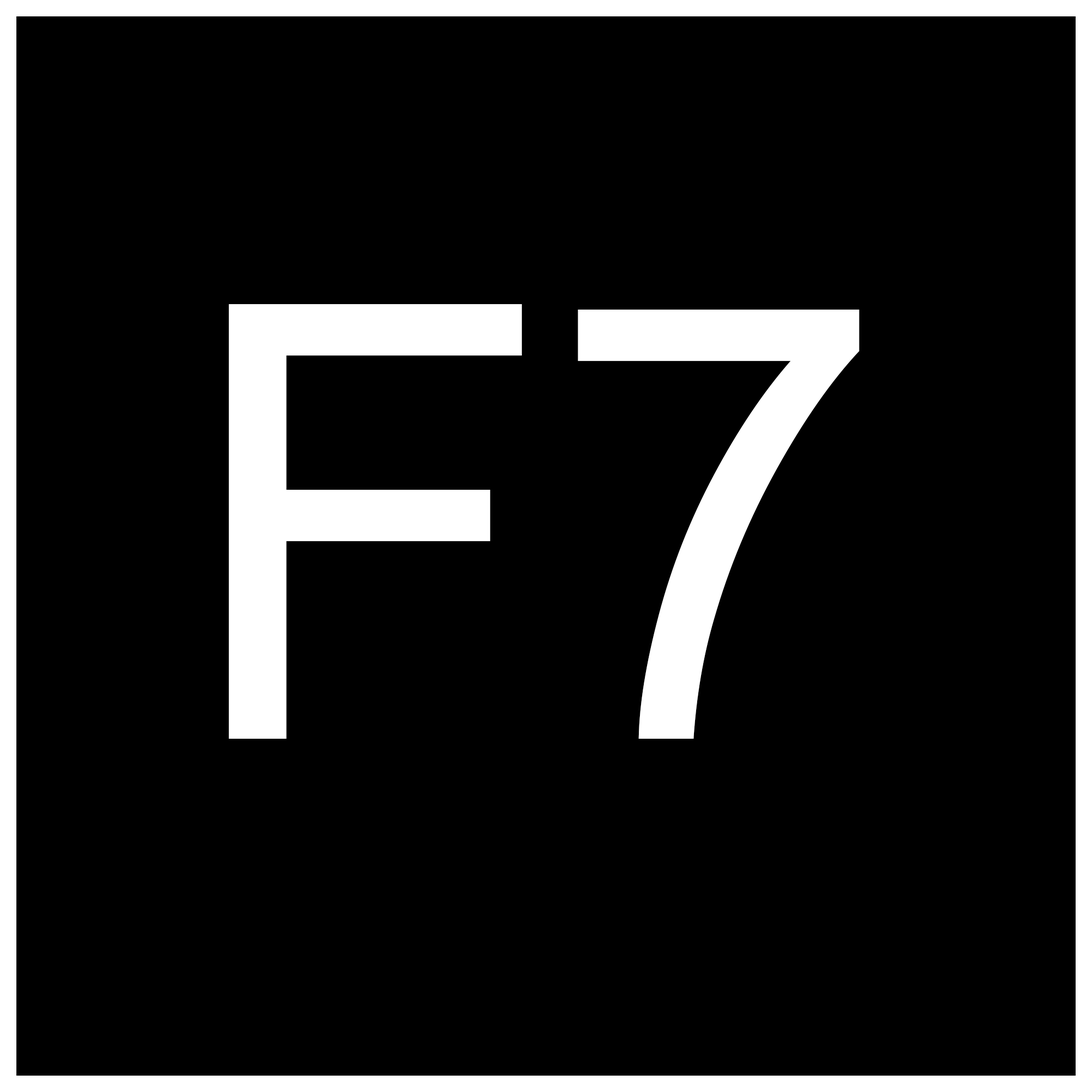
<style>
.page{position:relative;width:1092px;height:1092px;background:#000000}
.page>*{position:absolute;margin:0}
.t1{font:606.7px "ArialMT";color:#ffffff}
</style>
<div class="page">
<p class="t1" style="left:229px;top:304px;width:630px;height:435px">F7</p>
</div>
